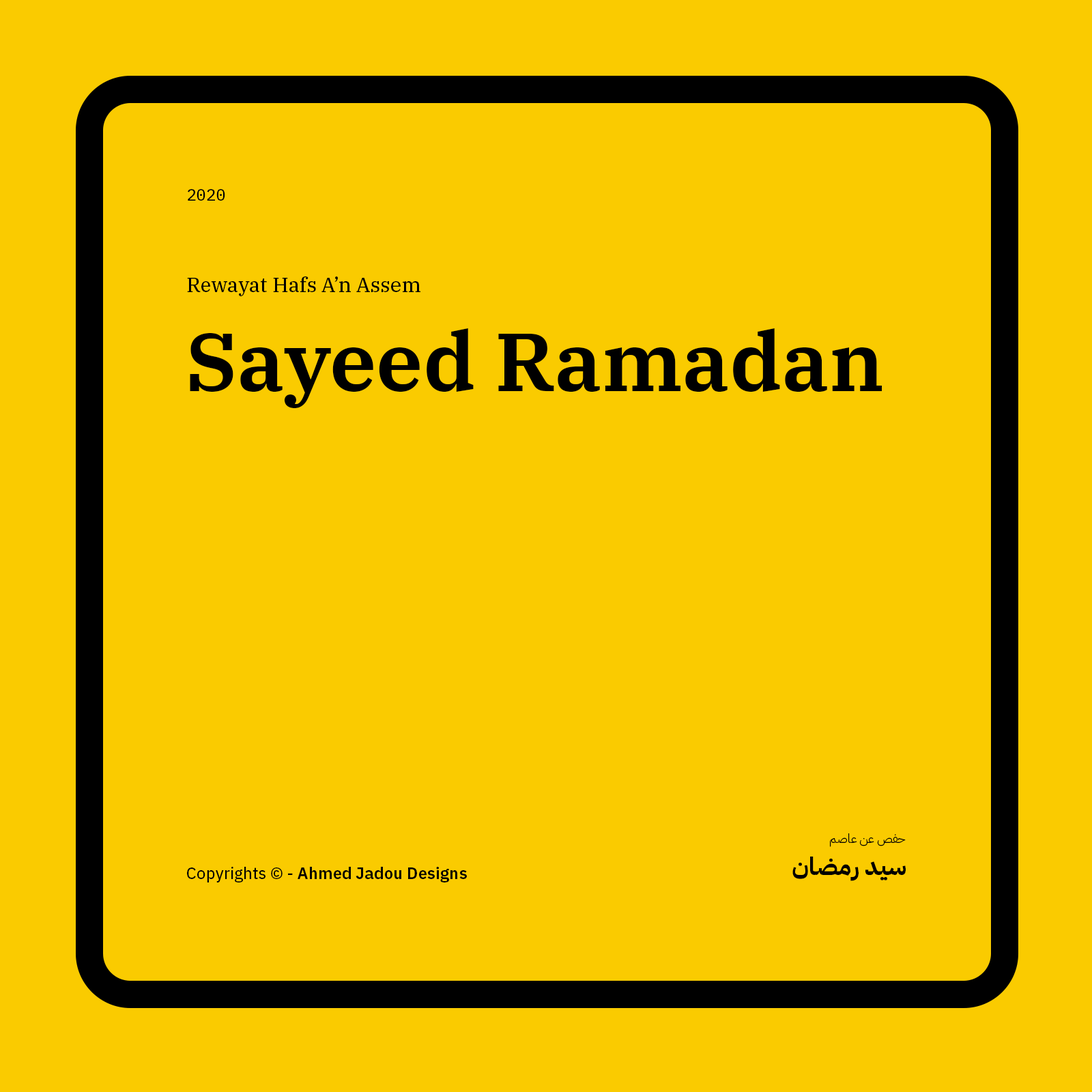
<style>
.page{position:relative;width:1092px;height:1092px;background:#facb00}
.page>*{position:absolute;margin:0}
.t1{font:16.4px "IBMPlexMono-Text";color:#000000}
.t2{font:20.5px "IBMPlexSerif-Text";color:#000000}
.t3{font:81.9px "IBMPlexSerif-SemiBold";color:#000000}
.t4{font:12.3px "IBMPlexArabic-Light";color:#000000}
.t5{font:24.6px "IBMPlexArabic-Bold";color:#000000}
.t6{font:16.4px "IBMPlexSans-SemiBold";color:#000000}
.t7{font:16.4px "IBMPlexSans-Text";color:#000000}
</style>
<div class="page">
<p class="t1" style="left:188px;top:189px;width:37px;height:12px">2020</p>
<p class="t2" style="left:187px;top:276px;width:233px;height:20px">Rewayat Hafs A’n Assem</p>
<p class="t3" style="left:190px;top:328px;width:692px;height:80px">Sayeed Ramadan</p>
<p class="t4" style="left:830px;top:833px;width:76px;height:14px">حفص عن عاصم</p>
<p class="t5" style="left:792px;top:857px;width:114px;height:24px">سيد رمضان</p>
<p class="t6" style="left:187px;top:867px;width:280px;height:15px"><span class="t7">Copyrights © - </span>Ahmed Jadou Designs</p>
</div>
